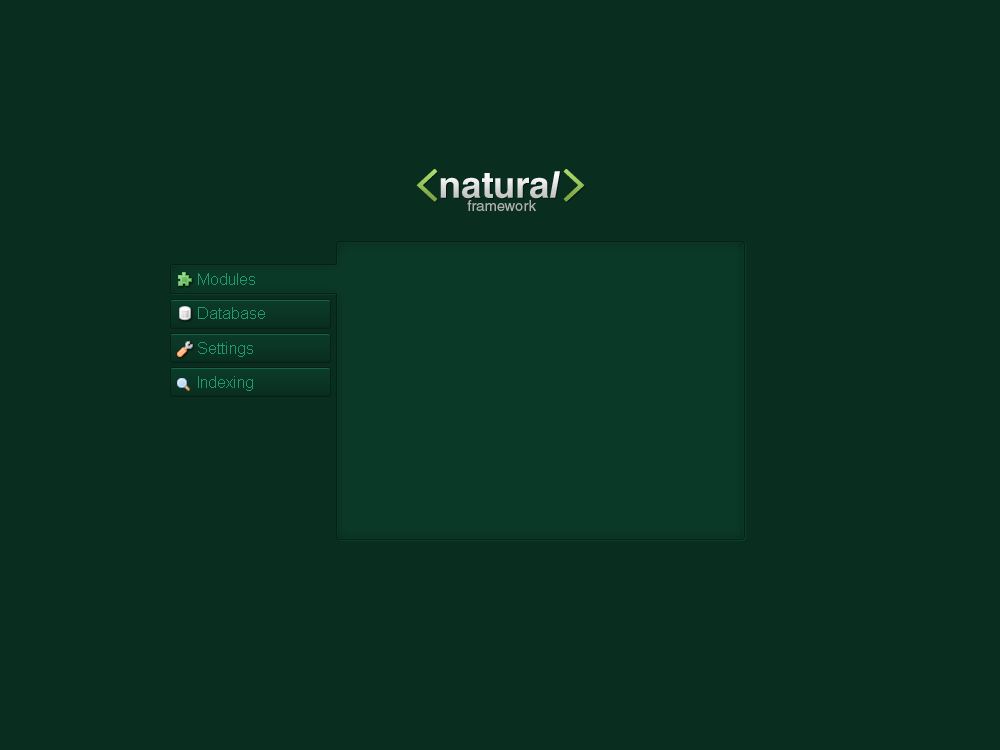
<style>
.page{position:relative;width:1000px;height:750px;background:#092e20}
.page>*{position:absolute;margin:0}
.t1{font:44.1px "LetterGothicStd-Bold";color:#92bf56;font-weight:bold}
.t2{font:36.8px "HelveticaLTStd-Bold"}
.t3{font:36.8px "HelveticaLTStd-BoldObl"}
.t4{font:14.7px "HelveticaLTStd-Roman";color:#aeaeae}
.t5{font:16px "ArialMT";color:#1e9c6d}
</style>
<div class="page">
<p class="t1" style="left:416px;top:169px;width:22px;height:33px">&lt;</p>
<p class="t2" style="left:440px;top:173px;width:109px;height:26px">natura</p>
<p class="t3" style="left:550px;top:171px;width:10px;height:27px">l</p>
<p class="t1" style="left:563px;top:169px;width:22px;height:33px">&gt;</p>
<p class="t4" style="left:467px;top:200px;width:69px;height:11px">framework</p>
<p class="t5" style="left:198px;top:273px;width:57px;height:12px">Modules</p>
<p class="t5" style="left:198px;top:307px;width:67px;height:12px">Database</p>
<p class="t5" style="left:198px;top:342px;width:55px;height:15px">Settings</p>
<p class="t5" style="left:198px;top:376px;width:55px;height:15px">Indexing</p>
</div>
